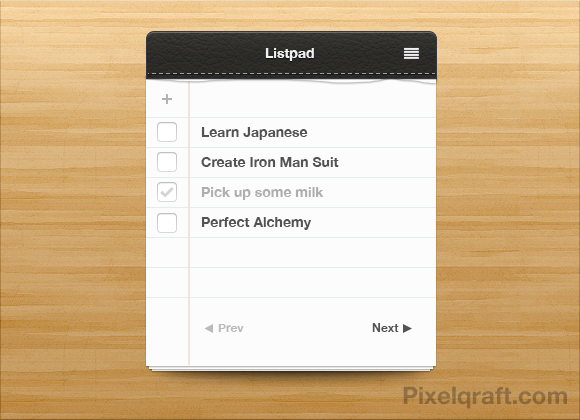
<style>
.page{position:relative;width:580px;height:420px;background:#fcfcfc}
.page>*{position:absolute;margin:0}
.t1{font:14px "HelveticaNeue-Bold";color:#f0f0f3}
.t2{font:14px/30px "HelveticaNeue-Bold";color:#535354}
.t3{font:14px/30px "HelveticaNeue-Bold";color:#aeaeae}
.t4{font:12px "HelveticaNeue-Bold";color:#bababa}
.t5{font:12px "HelveticaNeue-Bold";color:#535354}
.t6{font:24px "HelveticaNeue-Bold";color:#8e6d40}
</style>
<div class="page">
<p class="t1" style="left:265px;top:48px;width:49px;height:13px">Listpad</p>
<p class="t2" style="left:201px;top:127px;width:138px;height:103px">Learn Japanese<br>Create Iron Man Suit<br><span class="t3">Pick up some milk<br></span>Perfect Alchemy</p>
<p class="t4" style="left:218px;top:324px;width:26px;height:8px">Prev</p>
<p class="t5" style="left:372px;top:323px;width:27px;height:9px">Next</p>
<p class="t6" style="left:403px;top:386px;width:164px;height:23px">Pixelqraft.com</p>
</div>
